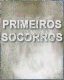
<style>
.page{position:relative;width:64px;height:80px}
.page>*{position:absolute;margin:0}
.t1{font:11px/13.1px "Arial-BoldMT";color:#e7dede;text-transform:uppercase;font-weight:bold;scale:0.92 1}
</style>
<div class="page">
<p class="t1" style="left:1px;top:20px;width:62px;height:22px;text-align:center">PRIMEIROS<br>SOCORROS</p>
</div>
